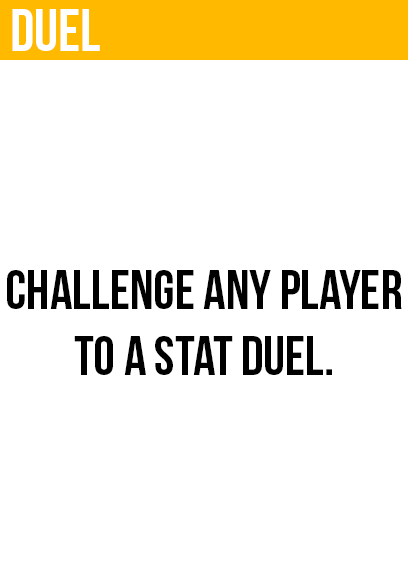
<style>
.page{position:relative;width:408px;height:585px;background:#ffffff}
.page>*{position:absolute;margin:0}
.t1{font:60px "BebasNeue";color:#ffffff}
.t2{font:55px "BebasNeue";color:#000000}
</style>
<div class="page">
<p class="t1" style="left:12px;top:9px;width:88px;height:42px">duel</p>
<p class="t2" style="left:7px;top:270px;width:395px;height:105px;text-align:center">challenge any player<br>to a stat duel.</p>
</div>
